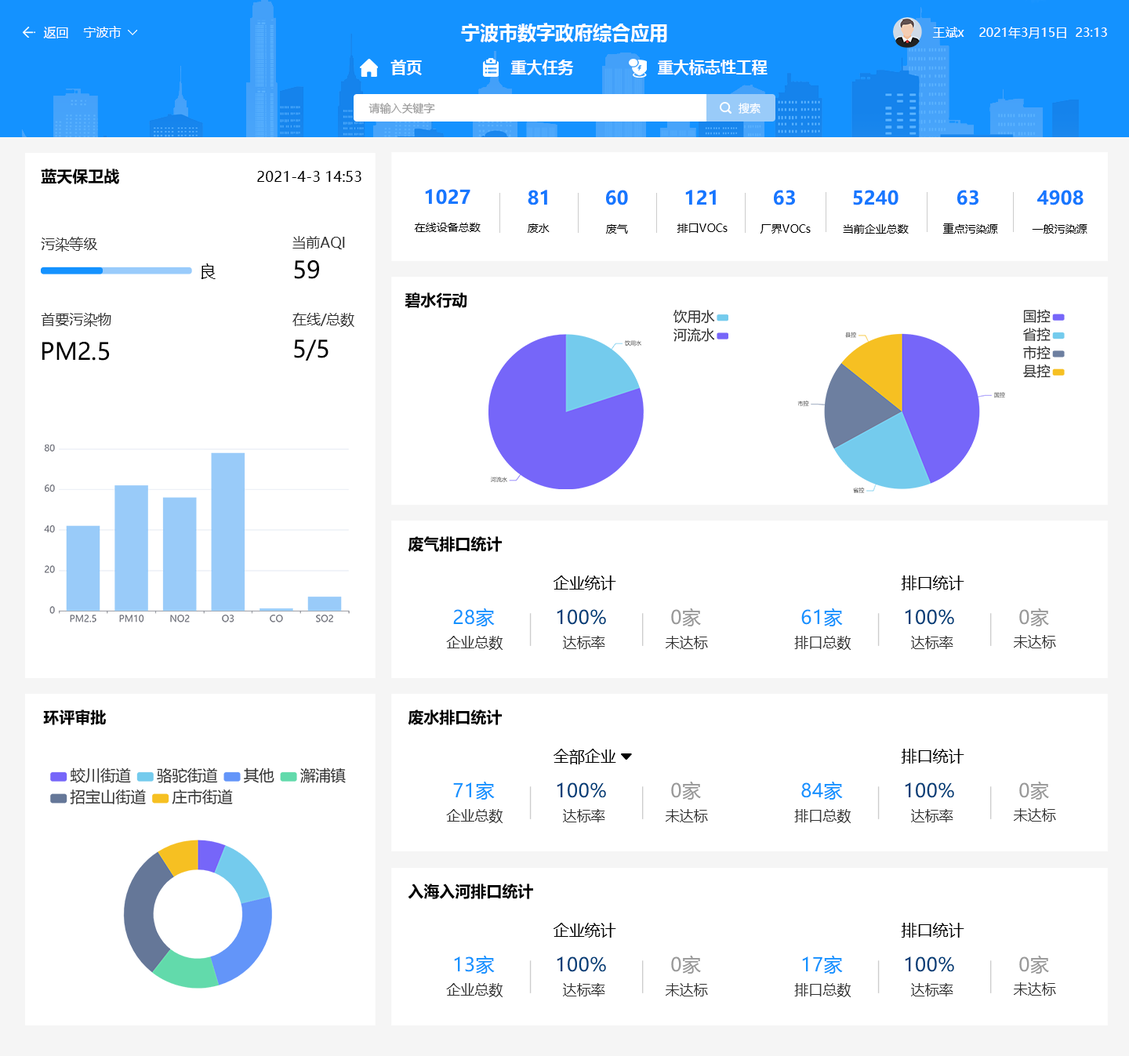
<style>
.page{position:relative;width:1129px;height:1056px;background:#ffffff}
.page>*{position:absolute;margin:0}
.t1{font:12.5px "MicrosoftYaHei";color:#ffffff}
.t2{font:18.8px "MicrosoftYaHei-Bold";color:#ffffff}
.t3{font:15.7px "MicrosoftYaHei-Bold";color:#ffffff}
.t4{font:11px "MicrosoftYaHei";color:#999999}
.t5{font:11px "MicrosoftYaHei";color:#ffffff}
.t6{font:15.7px "MicrosoftYaHei-Bold";color:#000000}
.t7{font:14.1px "MicrosoftYaHei";color:#000000}
.t8{font:18.8px "MicrosoftYaHei-Bold";color:#1677ff}
.t9{font:11px "MicrosoftYaHei";color:#000000}
.t10{font:14.1px "MicrosoftYaHei";color:#333333}
.t11{font:15.5px "MicrosoftYaHei";color:#000000}
.t12{font:23.5px "MicrosoftYaHei";color:#010101}
.t13{font:23.5px "MicrosoftYaHei";color:#000000}
.t14{font:15.7px "MicrosoftYaHei";color:#000000}
.t15{font:18.8px "MicrosoftYaHei";color:#1492ff}
.t16{font:18.8px "MicrosoftYaHei";color:#003e78}
.t17{font:18.8px "MicrosoftYaHei";color:#999999}
</style>
<div class="page">
<p class="t1" style="left:43px;top:27px;width:25px;height:11px">返回</p>
<p class="t1" style="left:83px;top:26px;width:39px;height:12px">宁波市</p>
<p class="t2" style="left:461px;top:23px;width:206px;height:19px">宁波市数字政府综合应用</p>
<p class="t1" style="left:932px;top:27px;width:32px;height:11px">王斌x</p>
<p class="t1" style="left:979px;top:27px;width:128px;height:11px">2021年3月15日  23:13</p>
<p class="t3" style="left:390px;top:60px;width:378px;height:15px">首页                   重大任务                  重大标志性工程</p>
<p class="t4" style="left:369px;top:103px;width:66px;height:11px">请输入关键字</p>
<p class="t5" style="left:739px;top:103px;width:22px;height:11px">搜索</p>
<p class="t6" style="left:41px;top:169px;width:79px;height:15px">蓝天保卫战</p>
<p class="t7" style="left:257px;top:171px;width:104px;height:11px">2021-4-3 14:53</p>
<p class="t8" style="left:425px;top:189px;width:45px;height:16px">1027</p>
<p class="t8" style="left:528px;top:190px;width:19px;height:15px">81</p>
<p class="t8" style="left:606px;top:190px;width:22px;height:15px">60</p>
<p class="t8" style="left:685px;top:190px;width:31px;height:15px">121</p>
<p class="t8" style="left:774px;top:190px;width:21px;height:15px">63</p>
<p class="t8" style="left:853px;top:190px;width:46px;height:15px">5240</p>
<p class="t8" style="left:957px;top:190px;width:22px;height:15px">63</p>
<p class="t8" style="left:1037px;top:190px;width:47px;height:15px">4908</p>
<p class="t9" style="left:415px;top:223px;width:66px;height:9px">在线设备总数</p>
<p class="t9" style="left:528px;top:223px;width:22px;height:10px">废水</p>
<p class="t9" style="left:606px;top:224px;width:22px;height:10px">废气</p>
<p class="t9" style="left:677px;top:223px;width:51px;height:10px">排口VOCs</p>
<p class="t9" style="left:761px;top:224px;width:50px;height:10px">厂界VOCs</p>
<p class="t9" style="left:843px;top:224px;width:66px;height:10px">当前企业总数</p>
<p class="t9" style="left:942px;top:223px;width:56px;height:11px">重点污染源</p>
<p class="t9" style="left:1032px;top:224px;width:55px;height:10px">一般污染源</p>
<p class="t10" style="left:41px;top:237px;width:56px;height:15px">污染等级</p>
<p class="t10" style="left:292px;top:236px;width:53px;height:13px">当前AQI</p>
<p class="t11" style="left:201px;top:263px;width:15px;height:16px">良</p>
<p class="t12" style="left:294px;top:260px;width:25px;height:19px">59</p>
<p class="t6" style="left:405px;top:292px;width:62px;height:16px">碧水行动</p>
<p class="t10" style="left:41px;top:313px;width:70px;height:14px">首要污染物</p>
<p class="t10" style="left:292px;top:313px;width:62px;height:14px">在线/总数</p>
<p class="t13" style="left:42px;top:342px;width:68px;height:19px">PM2.5</p>
<p class="t12" style="left:294px;top:340px;width:35px;height:21px">5/5</p>
<p class="t6" style="left:408px;top:536px;width:94px;height:16px">废气排口统计</p>
<p class="t14" style="left:554px;top:576px;width:62px;height:14px">企业统计</p>
<p class="t14" style="left:902px;top:576px;width:62px;height:14px">排口统计</p>
<p class="t15" style="left:453px;top:608px;width:42px;height:18px">28家</p>
<p class="t16" style="left:557px;top:609px;width:49px;height:16px">100%</p>
<p class="t17" style="left:671px;top:608px;width:30px;height:18px">0家</p>
<p class="t15" style="left:801px;top:608px;width:42px;height:18px">61家</p>
<p class="t16" style="left:905px;top:609px;width:49px;height:16px">100%</p>
<p class="t17" style="left:1019px;top:608px;width:30px;height:18px">0家</p>
<p class="t10" style="left:446px;top:636px;width:57px;height:14px">企业总数</p>
<p class="t10" style="left:563px;top:636px;width:42px;height:13px">达标率</p>
<p class="t10" style="left:666px;top:636px;width:42px;height:13px">未达标</p>
<p class="t10" style="left:794px;top:636px;width:57px;height:14px">排口总数</p>
<p class="t10" style="left:911px;top:636px;width:42px;height:13px">达标率</p>
<p class="t10" style="left:1014px;top:635px;width:42px;height:13px">未达标</p>
<p class="t6" style="left:43px;top:710px;width:63px;height:15px">环评审批</p>
<p class="t6" style="left:408px;top:710px;width:94px;height:15px">废水排口统计</p>
<p class="t14" style="left:554px;top:749px;width:62px;height:15px">全部企业</p>
<p class="t14" style="left:902px;top:749px;width:62px;height:15px">排口统计</p>
<p class="t15" style="left:453px;top:781px;width:42px;height:19px">71家</p>
<p class="t16" style="left:557px;top:782px;width:49px;height:16px">100%</p>
<p class="t17" style="left:671px;top:781px;width:30px;height:19px">0家</p>
<p class="t15" style="left:801px;top:781px;width:42px;height:19px">84家</p>
<p class="t16" style="left:905px;top:782px;width:49px;height:16px">100%</p>
<p class="t17" style="left:1019px;top:781px;width:30px;height:19px">0家</p>
<p class="t10" style="left:446px;top:809px;width:57px;height:14px">企业总数</p>
<p class="t10" style="left:563px;top:809px;width:42px;height:13px">达标率</p>
<p class="t10" style="left:666px;top:809px;width:42px;height:13px">未达标</p>
<p class="t10" style="left:794px;top:809px;width:57px;height:14px">排口总数</p>
<p class="t10" style="left:911px;top:809px;width:42px;height:13px">达标率</p>
<p class="t10" style="left:1014px;top:808px;width:42px;height:14px">未达标</p>
<p class="t6" style="left:408px;top:884px;width:125px;height:15px">入海入河排口统计</p>
<p class="t14" style="left:554px;top:923px;width:62px;height:15px">企业统计</p>
<p class="t14" style="left:902px;top:923px;width:62px;height:15px">排口统计</p>
<p class="t15" style="left:454px;top:955px;width:41px;height:19px">13家</p>
<p class="t16" style="left:557px;top:957px;width:49px;height:15px">100%</p>
<p class="t17" style="left:671px;top:955px;width:30px;height:19px">0家</p>
<p class="t15" style="left:802px;top:955px;width:41px;height:19px">17家</p>
<p class="t16" style="left:905px;top:957px;width:49px;height:15px">100%</p>
<p class="t17" style="left:1019px;top:955px;width:30px;height:19px">0家</p>
<p class="t10" style="left:446px;top:983px;width:57px;height:14px">企业总数</p>
<p class="t10" style="left:563px;top:983px;width:42px;height:14px">达标率</p>
<p class="t10" style="left:666px;top:983px;width:42px;height:14px">未达标</p>
<p class="t10" style="left:794px;top:983px;width:57px;height:14px">排口总数</p>
<p class="t10" style="left:911px;top:983px;width:42px;height:14px">达标率</p>
<p class="t10" style="left:1014px;top:982px;width:42px;height:14px">未达标</p>
</div>
